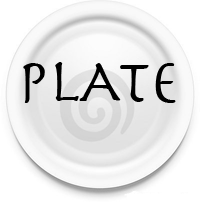
<style>
.page{position:relative;width:200px;height:202px;background:#ffffff}
.page>*{position:absolute;margin:0}
.t1{font:62.5px "Herculanum";letter-spacing:-0.025em;color:#000000}
</style>
<div class="page">
<p class="t1" style="left:23px;top:62px;width:153px;height:41px">PLATE</p>
</div>
